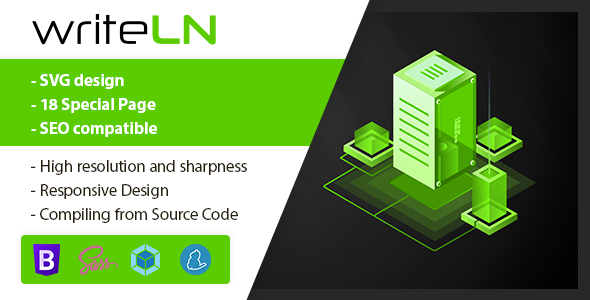
<style>
.page{position:relative;width:590px;height:300px;background:#ffffff}
.page>*{position:absolute;margin:0}
.t1{font:17px/24px "MyriadPro-Bold";color:#ffffff}
.t2{font:17px/24px "MyriadPro-Regular";color:#28200c}
</style>
<div class="page">
<p class="t1" style="left:31px;top:74px;width:126px;height:63px">- SVG design<br>- 18 Special Page<br>- SEO compatible</p>
<p class="t2" style="left:31px;top:160px;width:216px;height:63px">- High resolution and sharpness<br>- Responsive Design<br>- Compiling from Source Code</p>
</div>
